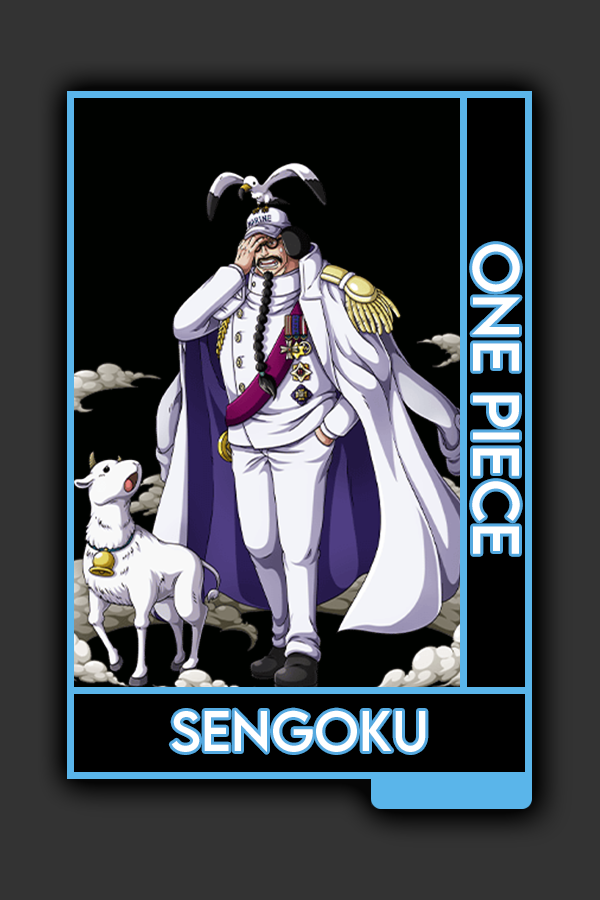
<style>
.page{position:relative;width:600px;height:900px;background:#333333}
.page>*{position:absolute;margin:0}
.t1{font:58.4px "LEMONMILK-Regular";color:#ffffff}
.t2{font:50.5px "LEMONMILK-Regular";color:#ffffff}
</style>
<div class="page">
<p class="t1" style="left:472px;top:244px;width:48px;height:310px;rotate:90deg">One Piece</p>
<p class="t2" style="left:171px;top:710px;width:255px;height:42px">Sengoku</p>
</div>
